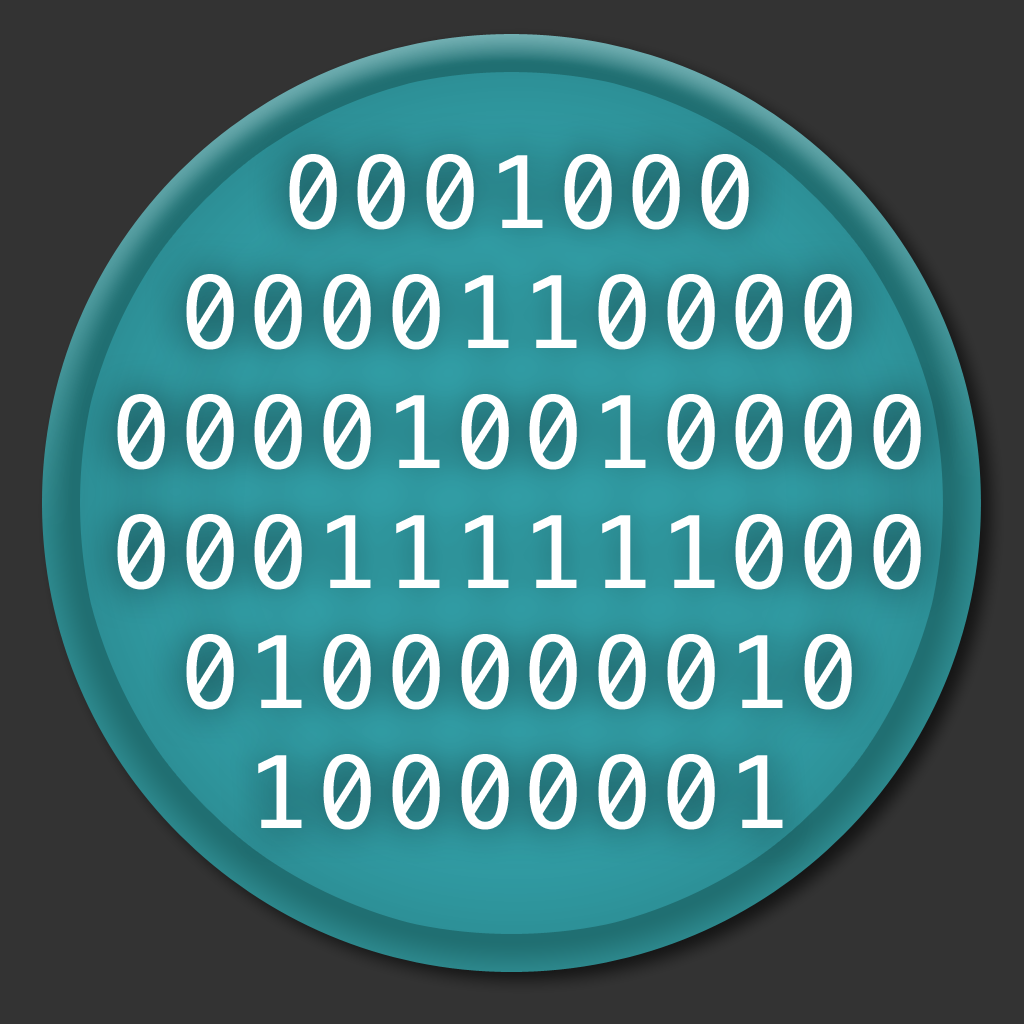
<style>
.page{position:relative;width:1024px;height:1024px;background:#333333}
.page>*{position:absolute;margin:0}
.t1{font:100px "Menlo-Regular";letter-spacing:0.085em;color:#ffffff}
</style>
<div class="page">
<p class="t1" style="left:117px;top:154px;width:804px;height:676px;text-align:center">0001000<br>0000110000<br>000010010000<br>000111111000<br>0100000010<br>10000001</p>
</div>
